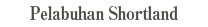
<style>
.page{position:relative;width:208px;height:27px;background:#ffffff}
.page>*{position:absolute;margin:0}
.t1{font:18px "RyuminPro-ExBold";letter-spacing:-0.04em;color:#4c4843;scale:0.9 1}
</style>
<div class="page">
<p class="t1" style="left:30px;top:6px;width:148px;height:14px">Pelabuhan Shortland</p>
</div>
